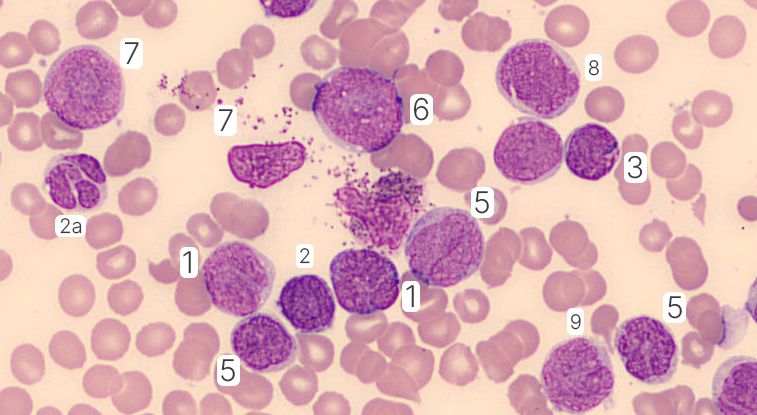
<style>
.page{position:relative;width:757px;height:415px}
.page>*{position:absolute;margin:0}
.t1{font:30px "Inter-LightBETA";color:#3a3a3a}
.t2{font:20px "Inter-LightBETA";color:#3a3a3a}
</style>
<div class="page">
<p class="t1" style="left:124px;top:42px;width:15px;height:23px">7</p>
<p class="t2" style="left:588px;top:60px;width:11px;height:16px">8</p>
<p class="t1" style="left:413px;top:97px;width:16px;height:24px">6</p>
<p class="t1" style="left:218px;top:109px;width:15px;height:23px">7</p>
<p class="t1" style="left:627px;top:155px;width:16px;height:24px">3</p>
<p class="t1" style="left:475px;top:191px;width:14px;height:23px">5</p>
<p class="t2" style="left:60px;top:218px;width:22px;height:16px">2a</p>
<p class="t1" style="left:183px;top:251px;width:8px;height:23px">1</p>
<p class="t2" style="left:300px;top:248px;width:10px;height:16px">2</p>
<p class="t1" style="left:406px;top:285px;width:8px;height:23px">1</p>
<p class="t1" style="left:668px;top:296px;width:14px;height:23px">5</p>
<p class="t2" style="left:571px;top:314px;width:10px;height:16px">9</p>
<p class="t1" style="left:221px;top:359px;width:14px;height:23px">5</p>
</div>
